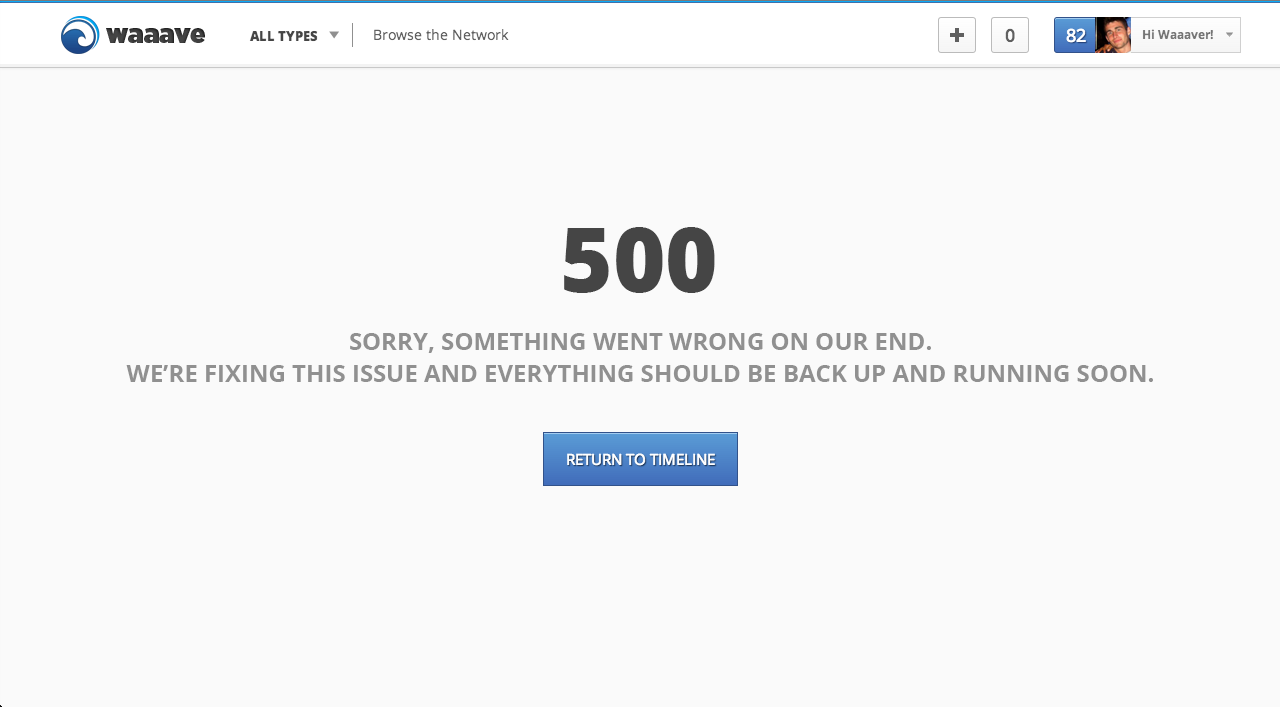
<style>
.page{position:relative;width:1280px;height:707px;background:#fafafa}
.page>*{position:absolute;margin:0}
.t1{font:90px "OpenSans-Extrabold";color:#454545}
.t2{font:24px/32px "OpenSans-Bold";color:#909090}
</style>
<div class="page">
<p class="t1" style="left:564px;top:227px;width:151px;height:66px">500</p>
<p class="t2" style="left:126px;top:333px;width:1027px;height:49px;text-align:center">SORRY, SOMETHING WENT WRONG ON OUR END.<br>WE’RE FIXING THIS ISSUE AND EVERYTHING SHOULD BE BACK UP AND RUNNING SOON.</p>
</div>
